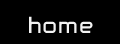
<style>
.page{position:relative;width:120px;height:44px;background:#000000}
.page>*{position:absolute;margin:0}
.t1{font:30px "-@-D-RCW2550v.2.00-";color:#f2f2f2}
</style>
<div class="page">
<p class="t1" style="left:29px;top:16px;width:64px;height:17px">home</p>
</div>
